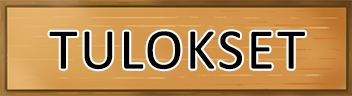
<style>
.page{position:relative;width:352px;height:96px}
.page>*{position:absolute;margin:0}
.t1{font:58px "Calibri";letter-spacing:0.04em;color:#000000}
</style>
<div class="page">
<p class="t1" style="left:49px;top:31px;width:256px;height:39px">TULOKSET</p>
</div>
